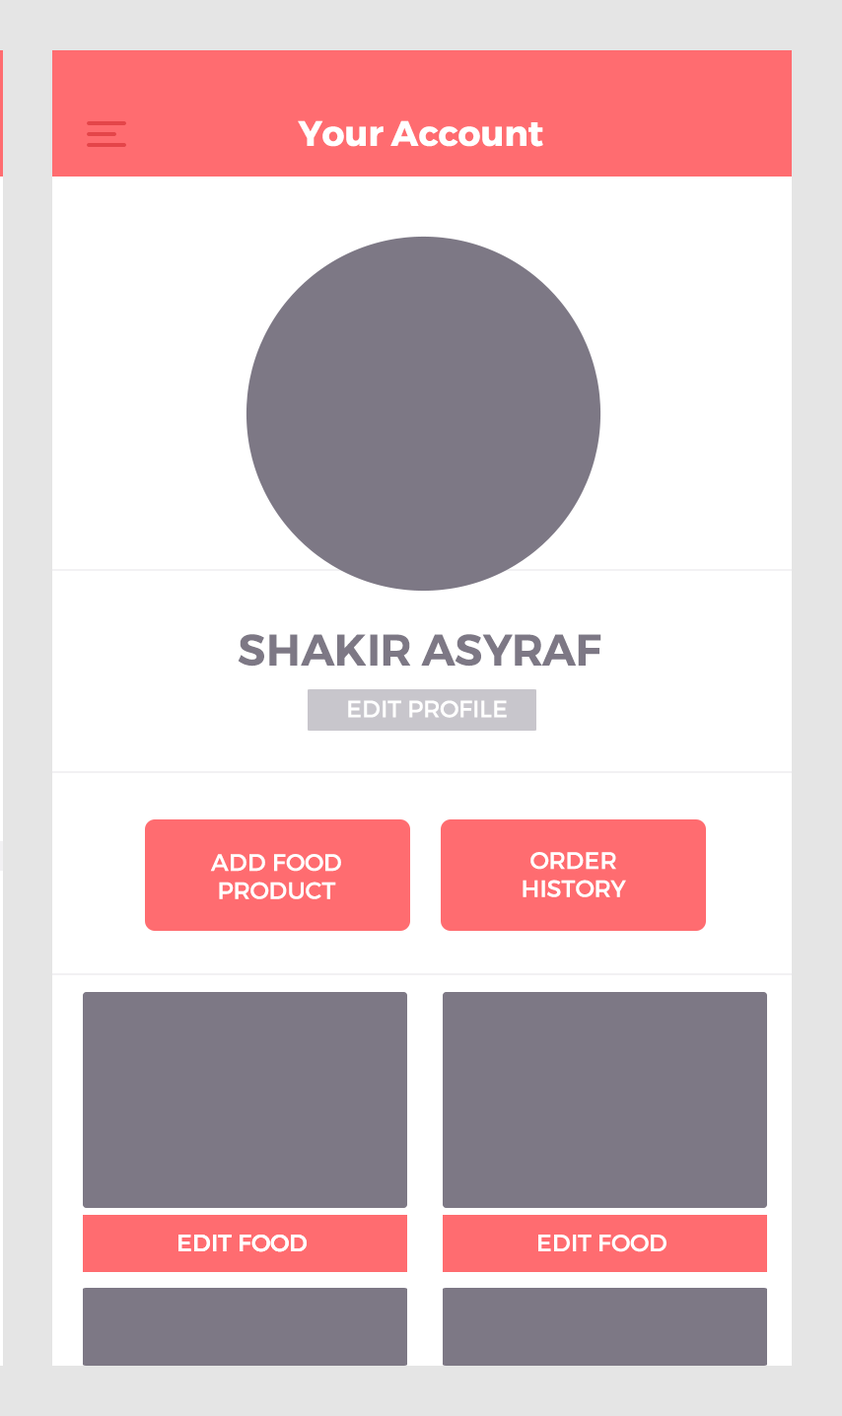
<style>
.page{position:relative;width:842px;height:1416px;background:#ffffff}
.page>*{position:absolute;margin:0}
.t1{font:35.5px "Montserrat-Bold";color:#ffffff}
.t2{font:43.8px "Montserrat-SemiBold";color:#7d7885}
.t3{font:23.7px "Montserrat-Regular";color:#ffffff}
.t4{font:23.7px/28.1px "Montserrat-Regular";color:#ffffff}
</style>
<div class="page">
<p class="t1" style="left:298px;top:120px;width:245px;height:27px">Your Account</p>
<p class="t2" style="left:238px;top:634px;width:364px;height:33px">SHAKIR ASYRAF</p>
<p class="t3" style="left:348px;top:700px;width:159px;height:18px">EDIT PROFILE</p>
<p class="t4" style="left:210px;top:854px;width:131px;height:45px;text-align:center">ADD FOOD<br>PRODUCT</p>
<p class="t4" style="left:523px;top:852px;width:103px;height:45px;text-align:center">ORDER<br>HISTORY</p>
<p class="t3" style="left:178px;top:1235px;width:129px;height:17px">EDIT FOOD</p>
<p class="t3" style="left:178px;top:1235px;width:129px;height:17px">EDIT FOOD</p>
<p class="t3" style="left:538px;top:1235px;width:129px;height:17px">EDIT FOOD</p>
</div>
